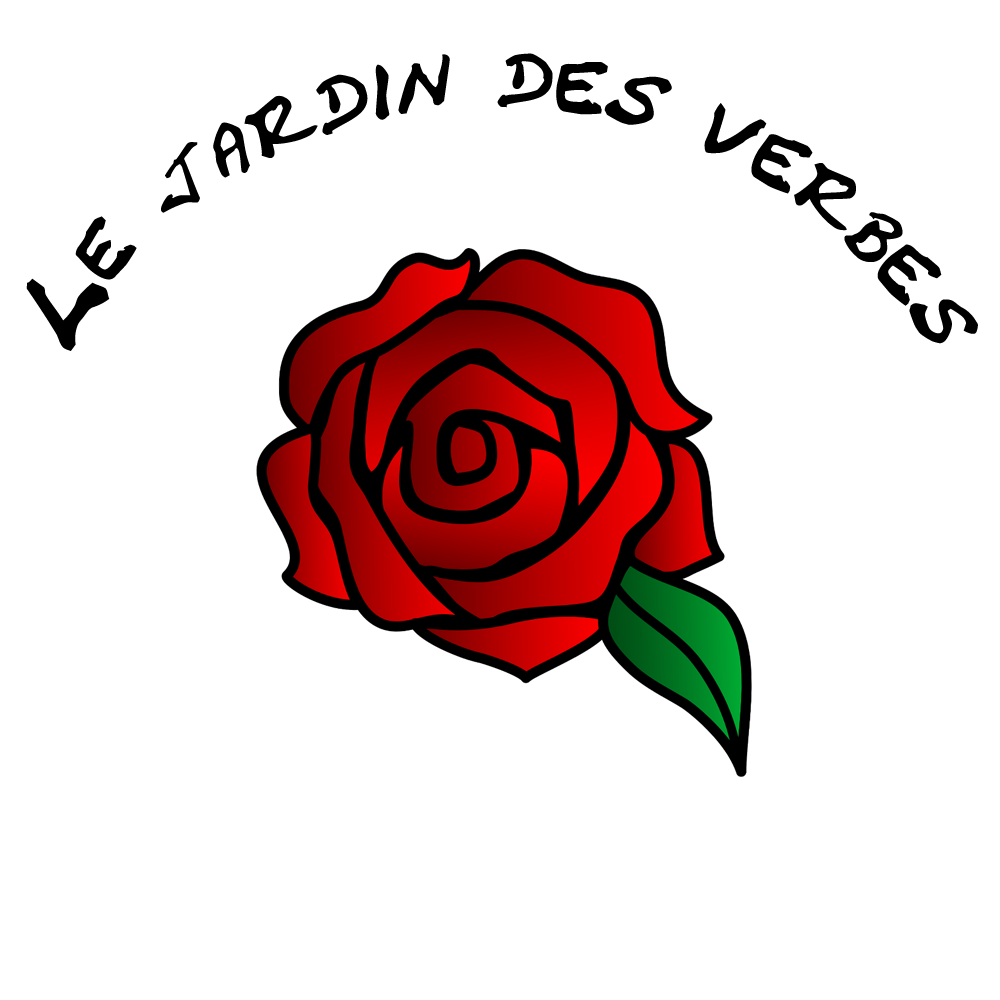
<style>
.page{position:relative;width:1000px;height:1000px;background:#ffffff}
.page>*{position:absolute;margin:0}
.t1{font:75px "CrackedJohnnie";color:#000000;font-weight:bold}
</style>
<div class="page">
<p class="t1" style="left:26px;top:53px;width:952px;height:298px;rotate:1deg">Le jardin des verbes</p>
</div>
